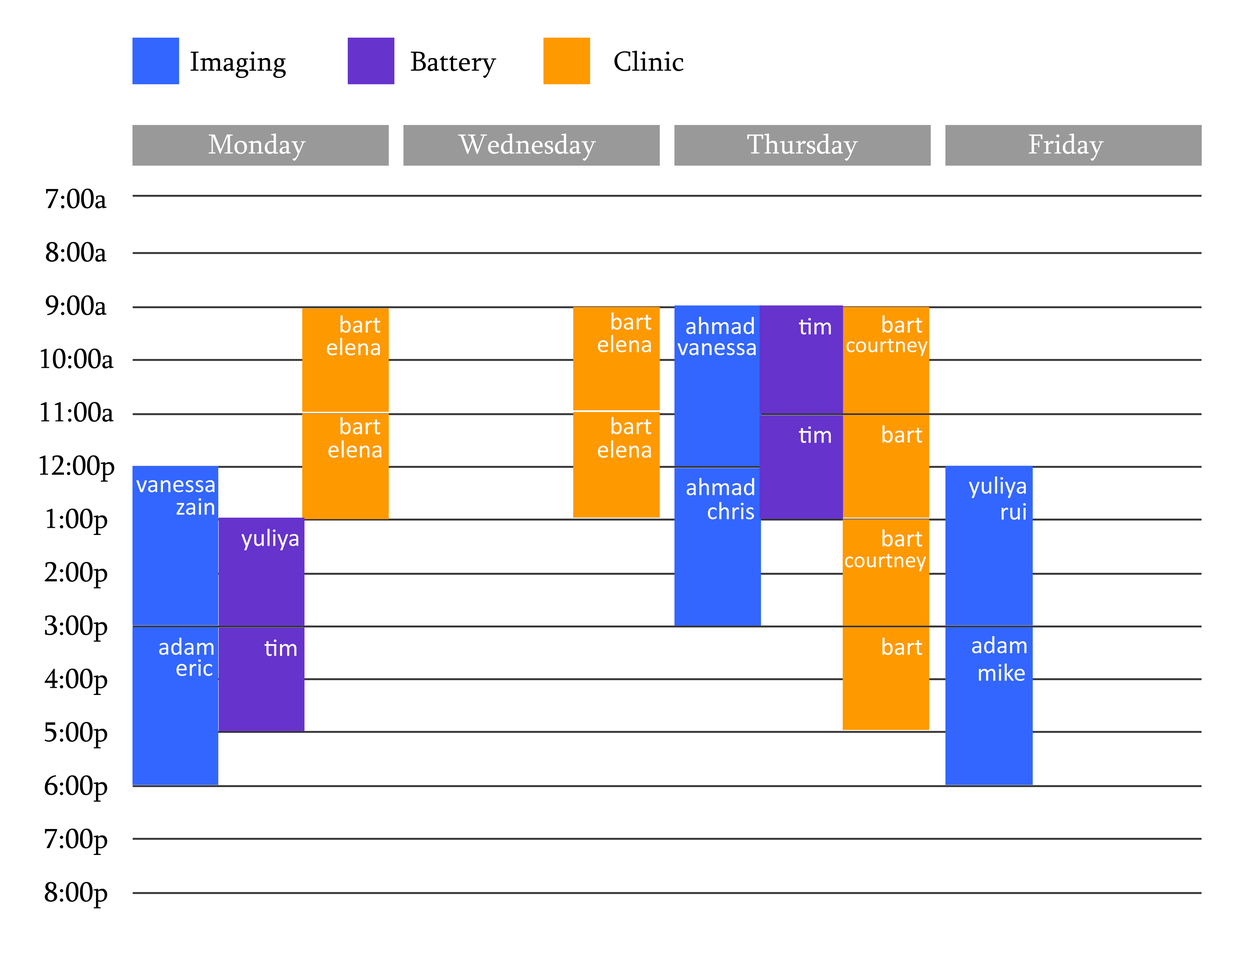
<style>
.page{position:relative;width:1242px;height:960px;background:#ffffff}
.page>*{position:absolute;margin:0}
.t1{font:28.2px "Sylfaen";color:#000000}
.t2{font:28.2px "Sylfaen";color:#ffffff}
.t3{font:28.2px/53.3px "Sylfaen";color:#000000}
.t4{font:25.1px "Calibri";color:#ffffff}
.t5{font:22.7px "Calibri";color:#ffffff}
</style>
<div class="page">
<p class="t1" style="left:190px;top:52px;width:96px;height:26px">Imaging</p>
<p class="t1" style="left:411px;top:52px;width:86px;height:26px">Battery</p>
<p class="t1" style="left:614px;top:50px;width:70px;height:21px">Clinic</p>
<p class="t2" style="left:209px;top:133px;width:97px;height:28px">Monday</p>
<p class="t2" style="left:458px;top:133px;width:138px;height:28px">Wednesday</p>
<p class="t2" style="left:747px;top:133px;width:111px;height:28px">Thursday</p>
<p class="t2" style="left:1029px;top:133px;width:75px;height:28px">Friday</p>
<p class="t3" style="left:40px;top:189px;width:74px;height:719px;text-align:center">7:00a<br>8:00a<br>9:00a<br>10:00a<br>11:00a<br>12:00p<br>1:00p<br>2:00p<br>3:00p<br>4:00p<br>5:00p<br>6:00p<br>7:00p<br>8:00p</p>
<p class="t4" style="left:340px;top:315px;width:41px;height:18px">bart</p>
<p class="t4" style="left:611px;top:312px;width:41px;height:18px">bart</p>
<p class="t4" style="left:686px;top:317px;width:68px;height:17px">ahmad</p>
<p class="t4" style="left:799px;top:318px;width:32px;height:17px">tim</p>
<p class="t4" style="left:882px;top:315px;width:41px;height:18px">bart</p>
<p class="t4" style="left:327px;top:338px;width:53px;height:17px">elena</p>
<p class="t4" style="left:598px;top:335px;width:53px;height:17px">elena</p>
<p class="t5" style="left:847px;top:339px;width:81px;height:17px">courtney</p>
<p class="t4" style="left:678px;top:343px;width:78px;height:12px">vanessa</p>
<p class="t4" style="left:340px;top:417px;width:41px;height:17px">bart</p>
<p class="t4" style="left:611px;top:417px;width:41px;height:17px">bart</p>
<p class="t4" style="left:882px;top:425px;width:41px;height:18px">bart</p>
<p class="t4" style="left:799px;top:426px;width:32px;height:17px">tim</p>
<p class="t4" style="left:328px;top:440px;width:54px;height:18px">elena</p>
<p class="t4" style="left:598px;top:440px;width:53px;height:18px">elena</p>
<p class="t4" style="left:136px;top:480px;width:79px;height:12px">vanessa</p>
<p class="t4" style="left:687px;top:478px;width:67px;height:17px">ahmad</p>
<p class="t4" style="left:969px;top:476px;width:57px;height:22px">yuliya</p>
<p class="t4" style="left:177px;top:498px;width:37px;height:17px">zain</p>
<p class="t4" style="left:708px;top:502px;width:46px;height:17px">chris</p>
<p class="t4" style="left:1002px;top:503px;width:24px;height:17px">rui</p>
<p class="t4" style="left:241px;top:529px;width:58px;height:21px">yuliya</p>
<p class="t4" style="left:882px;top:529px;width:41px;height:18px">bart</p>
<p class="t5" style="left:845px;top:554px;width:81px;height:17px">courtney</p>
<p class="t4" style="left:159px;top:637px;width:55px;height:18px">adam</p>
<p class="t4" style="left:264px;top:639px;width:33px;height:17px">tim</p>
<p class="t4" style="left:882px;top:637px;width:41px;height:18px">bart</p>
<p class="t4" style="left:972px;top:636px;width:55px;height:17px">adam</p>
<p class="t4" style="left:177px;top:659px;width:35px;height:17px">eric</p>
<p class="t4" style="left:979px;top:663px;width:46px;height:18px">mike</p>
</div>
